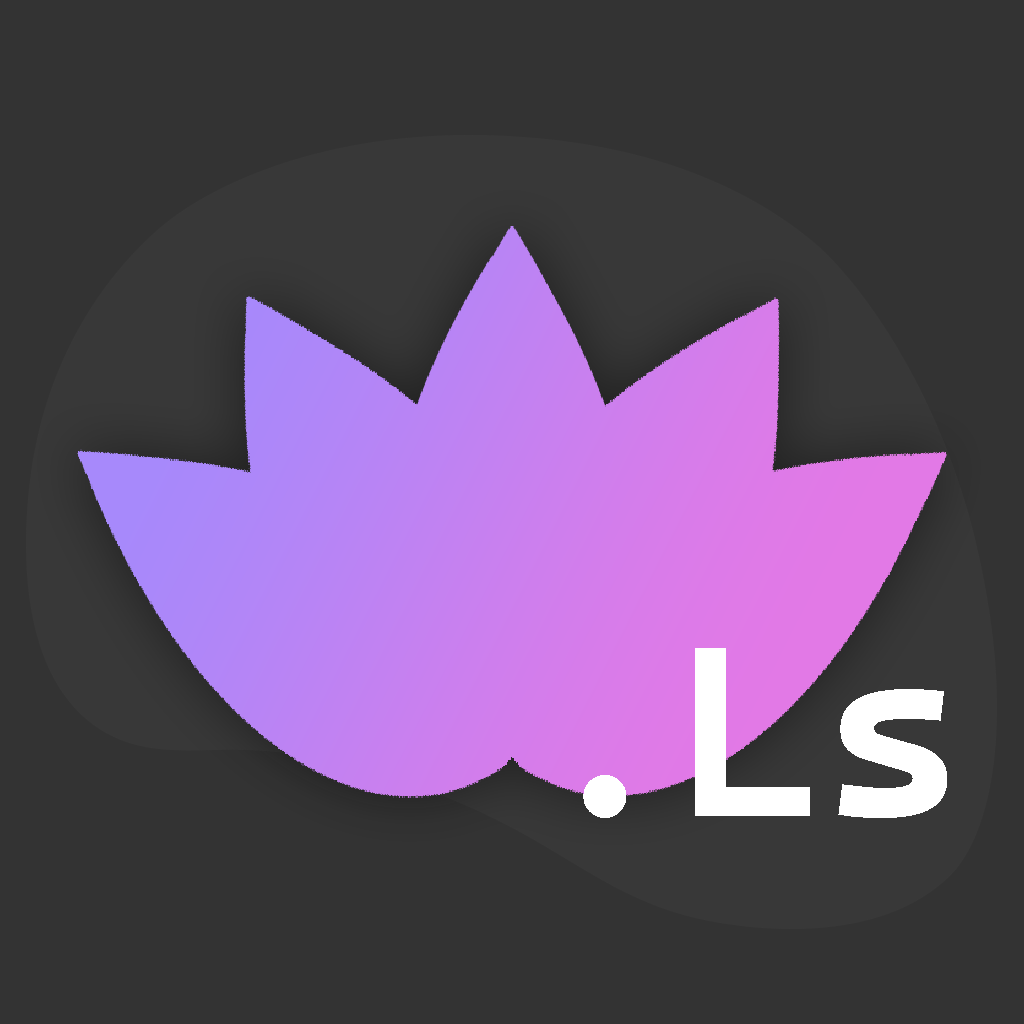
<style>
.page{position:relative;width:1024px;height:1024px;background:#333333}
.page>*{position:absolute;margin:0}
.t1{font:241.7px "CascadiaCodeRoman-Bold";letter-spacing:0.01em;color:#ffffff}
</style>
<div class="page">
<p class="t1" style="left:583px;top:648px;width:364px;height:170px">.Ls</p>
</div>
